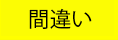
<style>
.page{position:relative;width:118px;height:40px;background:#fcfc04}
.page>*{position:absolute;margin:0}
.t1{font:21.2px "KozGoPr6N-Regular";color:#000000}
</style>
<div class="page">
<p class="t1" style="left:29px;top:8px;width:63px;height:21px">間違い</p>
</div>
